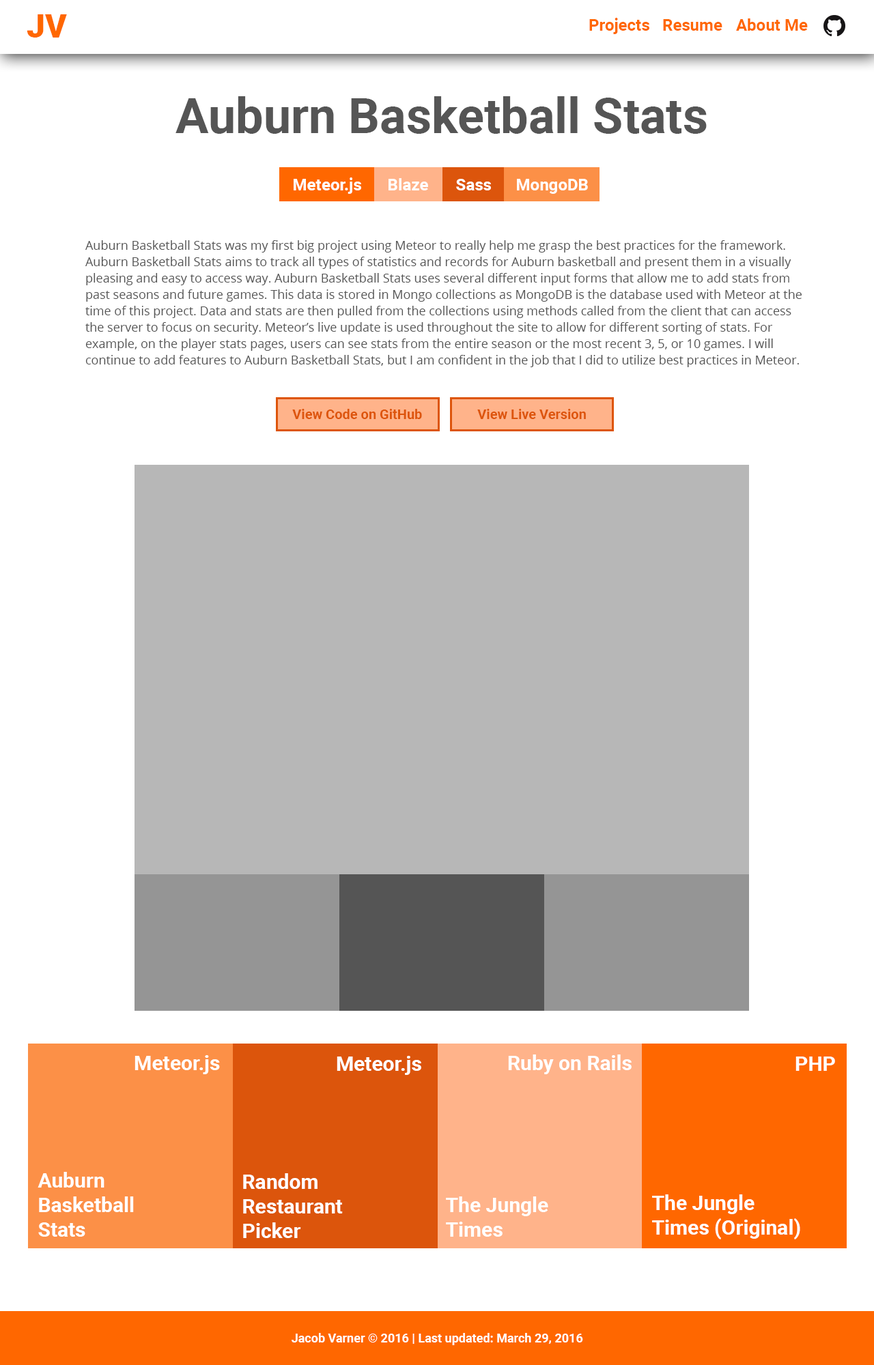
<style>
.page{position:relative;width:874px;height:1365px;background:#ffffff}
.page>*{position:absolute;margin:0}
.t1{font:32.8px "Roboto-Black";color:#ff6700}
.t2{font:16.4px "Roboto-Bold";color:#ff6700}
.t3{font:49.1px "Roboto-Bold";color:#555555}
.t4{font:16.4px "Roboto-Bold";color:#ffffff}
.t5{font:12.3px/16.4px "OpenSans";color:#555555}
.t6{font:13.6px "Roboto-Bold";color:#dd550c}
.t7{font:20.5px "Roboto-Bold";color:#ffffff}
.t8{font:12.3px "Roboto-Bold";color:#ffffff}
</style>
<div class="page">
<p class="t1" style="left:27px;top:14px;width:40px;height:24px">JV</p>
<p class="t2" style="left:589px;top:18px;width:218px;height:16px">Projects Resume About Me</p>
<p class="t3" style="left:175px;top:96px;width:531px;height:38px">Auburn Basketball Stats</p>
<p class="t4" style="left:293px;top:177px;width:68px;height:17px">Meteor.js</p>
<p class="t4" style="left:388px;top:178px;width:40px;height:12px">Blaze</p>
<p class="t4" style="left:456px;top:179px;width:35px;height:11px">Sass</p>
<p class="t4" style="left:517px;top:179px;width:71px;height:15px">MongoDB</p>
<p class="t5" style="left:85px;top:240px;width:716px;height:127px">Auburn Basketball Stats was my first big project using Meteor to really help me grasp the best practices for the framework.<br>Auburn Basketball Stats aims to track all types of statistics and records for Auburn basketball and present them in a visually<br>pleasing and easy to access way. Auburn Basketball Stats uses several different input forms that allow me to add stats from<br>past seasons and future games. This data is stored in Mongo collections as MongoDB is the database used with Meteor at the<br>time of this project. Data and stats are then pulled from the collections using methods called from the client that can access<br>the server to focus on security. Meteor’s live update is used throughout the site to allow for different sorting of stats. For<br>example, on the player stats pages, users can see stats from the entire season or the most recent 3, 5, or 10 games. I will<br>continue to add features to Auburn Basketball Stats, but I am confident in the job that I did to utilize best practices in Meteor.</p>
<p class="t6" style="left:292px;top:409px;width:130px;height:10px">View Code on GitHub</p>
<p class="t6" style="left:477px;top:409px;width:109px;height:10px">View Live Version</p>
<p class="t7" style="left:134px;top:1055px;width:86px;height:19px">Meteor.js</p>
<p class="t7" style="left:336px;top:1056px;width:85px;height:19px">Meteor.js</p>
<p class="t7" style="left:508px;top:1054px;width:123px;height:20px">Ruby on Rails</p>
<p class="t7" style="left:795px;top:1056px;width:40px;height:15px">PHP</p>
<p class="t7" style="left:38px;top:1172px;width:96px;height:65px">Auburn<br>Basketball<br>Stats</p>
<p class="t7" style="left:243px;top:1173px;width:100px;height:65px">Random<br>Restaurant<br>Picker</p>
<p class="t7" style="left:446px;top:1196px;width:102px;height:41px">The Jungle<br>Times</p>
<p class="t7" style="left:652px;top:1194px;width:148px;height:45px">The Jungle<br>Times (Original)</p>
<p class="t8" style="left:291px;top:1333px;width:292px;height:12px">Jacob Varner © 2016 | Last updated: March 29, 2016</p>
</div>
